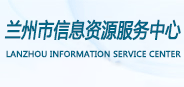
<style>
.page{position:relative;width:184px;height:87px}
.page>*{position:absolute;margin:0}
.t1{font:20.2px "MicrosoftYaHei";color:#066585;font-weight:bold;font-style:italic;scale:0.77 1}
.t2{font:8px "MicrosoftYaHei";color:#066585;font-weight:bold}
</style>
<div class="page">
<p class="t1" style="left:4px;top:19px;width:177px;height:22px">兰州市信息资源服务中心</p>
<p class="t2" style="left:6px;top:50px;width:175px;height:8px">LANZHOU INFORMATION SERVICE CENTER</p>
</div>
